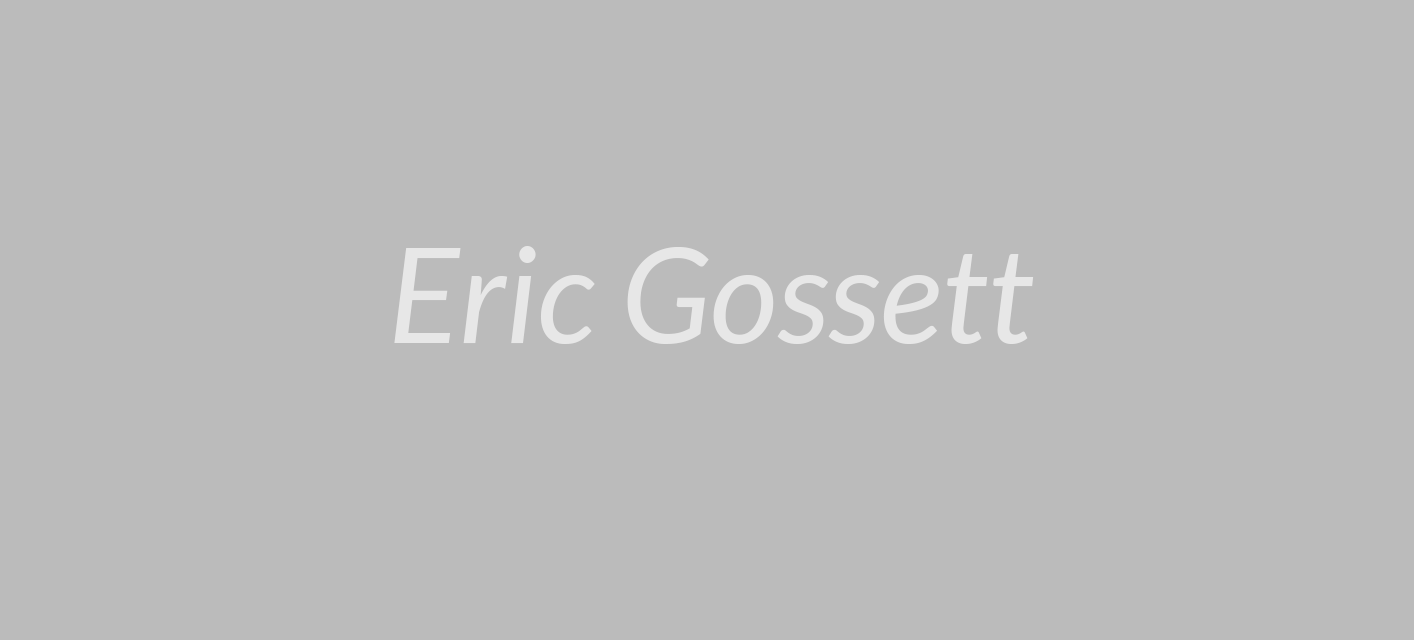
<style>
.page{position:relative;width:1414px;height:640px;background:#bbbbbb}
.page>*{position:absolute;margin:0}
.t1{font:132.7px "Lato-Italic";color:#e7e7e7}
</style>
<div class="page">
<p class="t1" style="left:394px;top:246px;width:640px;height:98px">Eric Gossett</p>
</div>
